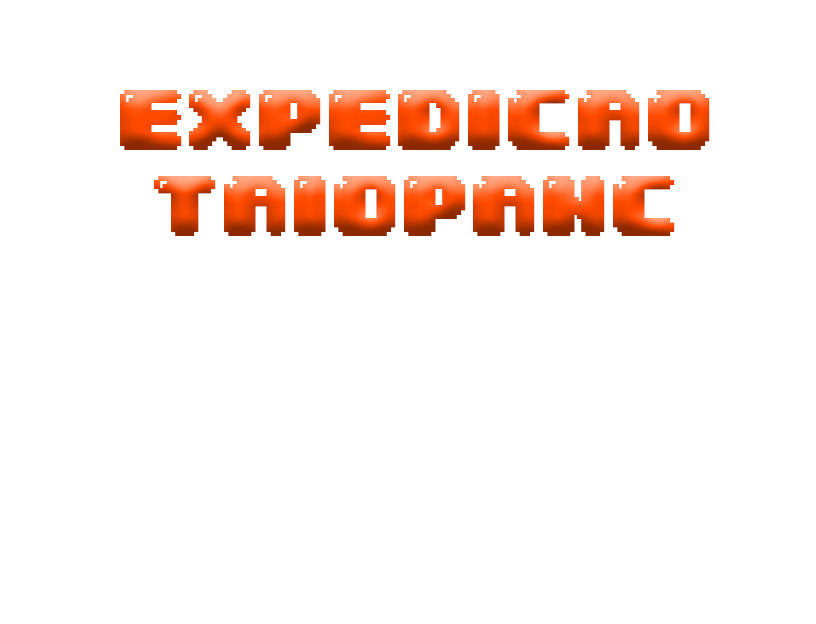
<style>
.page{position:relative;width:816px;height:624px;background:#ffffff}
.page>*{position:absolute;margin:0}
.t1{font:72px "04b30";font-weight:bold}
</style>
<div class="page">
<p class="t1" style="left:120px;top:90px;width:590px;height:146px;text-align:center">EXPEDICAO TAIOPANC</p>
</div>
